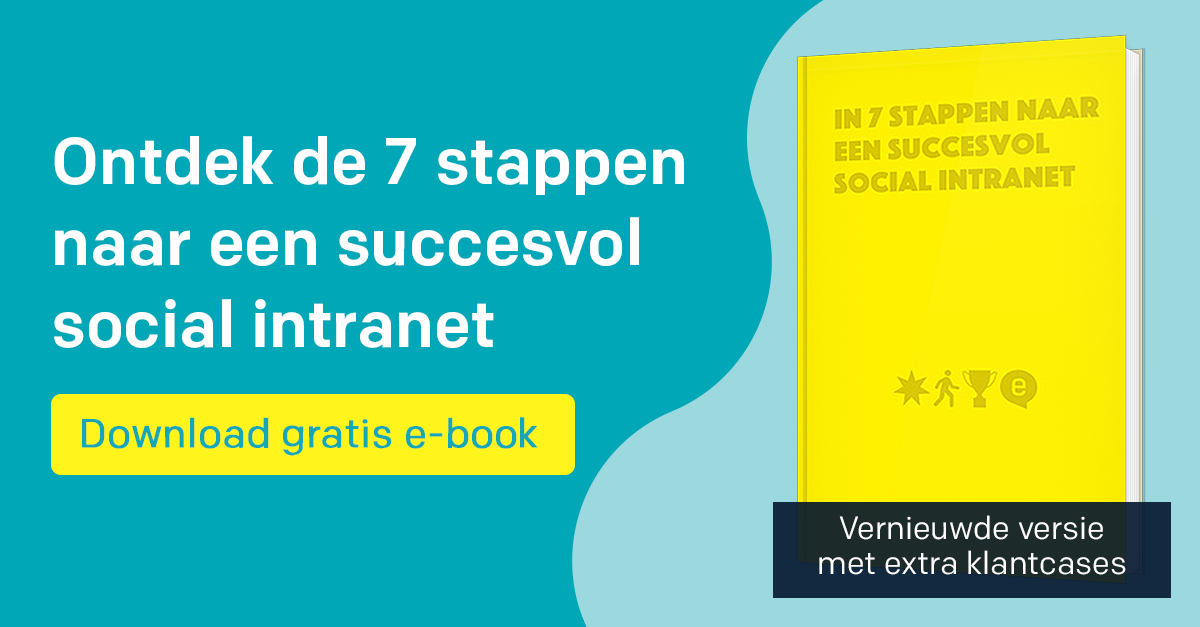
<style>
.page{position:relative;width:1200px;height:627px;background:#00a7b6}
.page>*{position:absolute;margin:0}
.t1{font:65.3px/81.3px "Chrono-Medium";color:#ffffff}
.t2{font:39.9px "Chrono-Regular";color:#16a7b6;font-weight:bold}
.t3{font:32px/34.7px "Chrono-Regular";color:#ffffff}
</style>
<div class="page">
<p class="t1" style="left:54px;top:136px;width:630px;height:212px">Ontdek de 7 stappen <br>naar een succesvol<br>social intranet</p>
<p class="t1" style="left:54px;top:136px;width:630px;height:212px">Ontdek de 7 stappen <br>naar een succesvol<br>social intranet</p>
<p class="t2" style="left:82px;top:417px;width:456px;height:39px">Download gratis e-book</p>
<p class="t2" style="left:82px;top:417px;width:456px;height:39px">Download gratis e-book</p>
<p class="t3" style="left:819px;top:515px;width:307px;height:60px;text-align:center">Vernieuwde versie<br>met extra klantcases</p>
<p class="t3" style="left:819px;top:515px;width:307px;height:60px;text-align:center">Vernieuwde versie<br>met extra klantcases</p>
</div>
